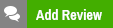
<style>
.page{position:relative;width:113px;height:28px;background:#43ae00}
.page>*{position:absolute;margin:0}
.t1{font:14.5px "ArchivoNarrow-Bold";color:#ffffff}
</style>
<div class="page">
<p class="t1" style="left:36px;top:9px;width:66px;height:11px">Add Review</p>
</div>
